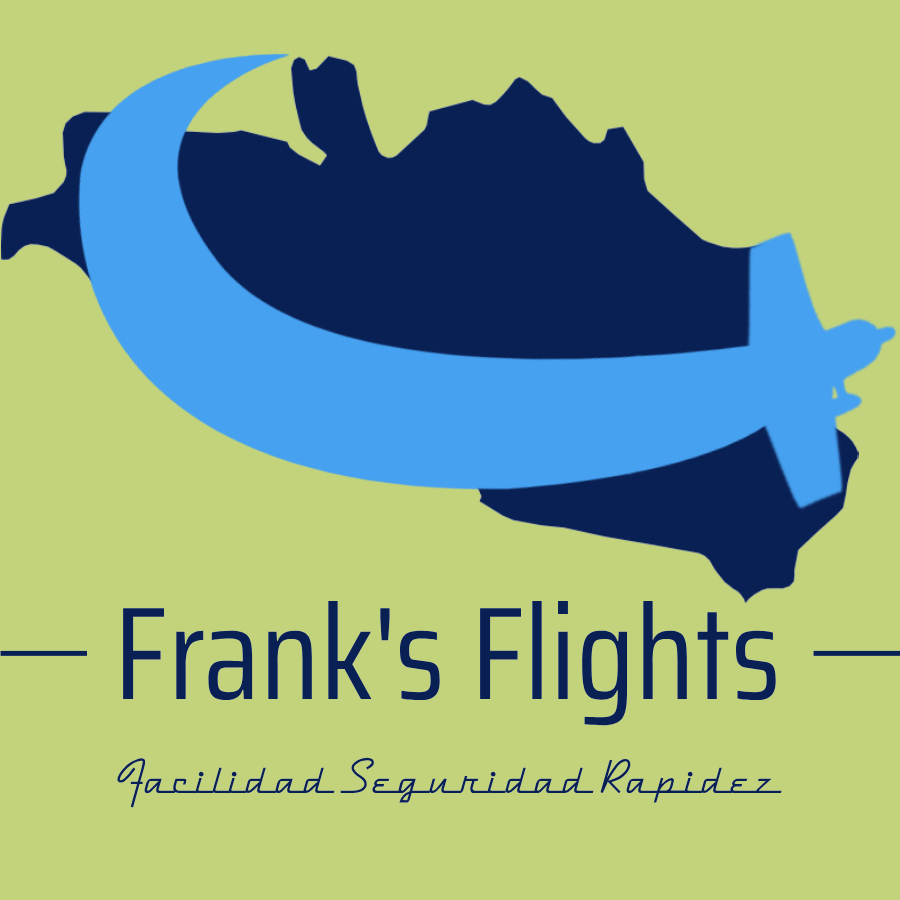
<style>
.page{position:relative;width:900px;height:900px;background:#c3d37b}
.page>*{position:absolute;margin:0}
.t1{font:131.9px "SairaCondensed-Regular";color:#092054}
.t2{font:53.3px "DymaxionScript";color:#092054}
</style>
<div class="page">
<p class="t1" style="left:123px;top:601px;width:653px;height:125px">Frank's Flights</p>
<p class="t1" style="left:123px;top:601px;width:653px;height:125px">Frank's Flights</p>
<p class="t2" style="left:117px;top:757px;width:665px;height:51px">Facilidad Seguridad Rapidez</p>
<p class="t2" style="left:117px;top:757px;width:665px;height:51px">Facilidad Seguridad Rapidez</p>
</div>
